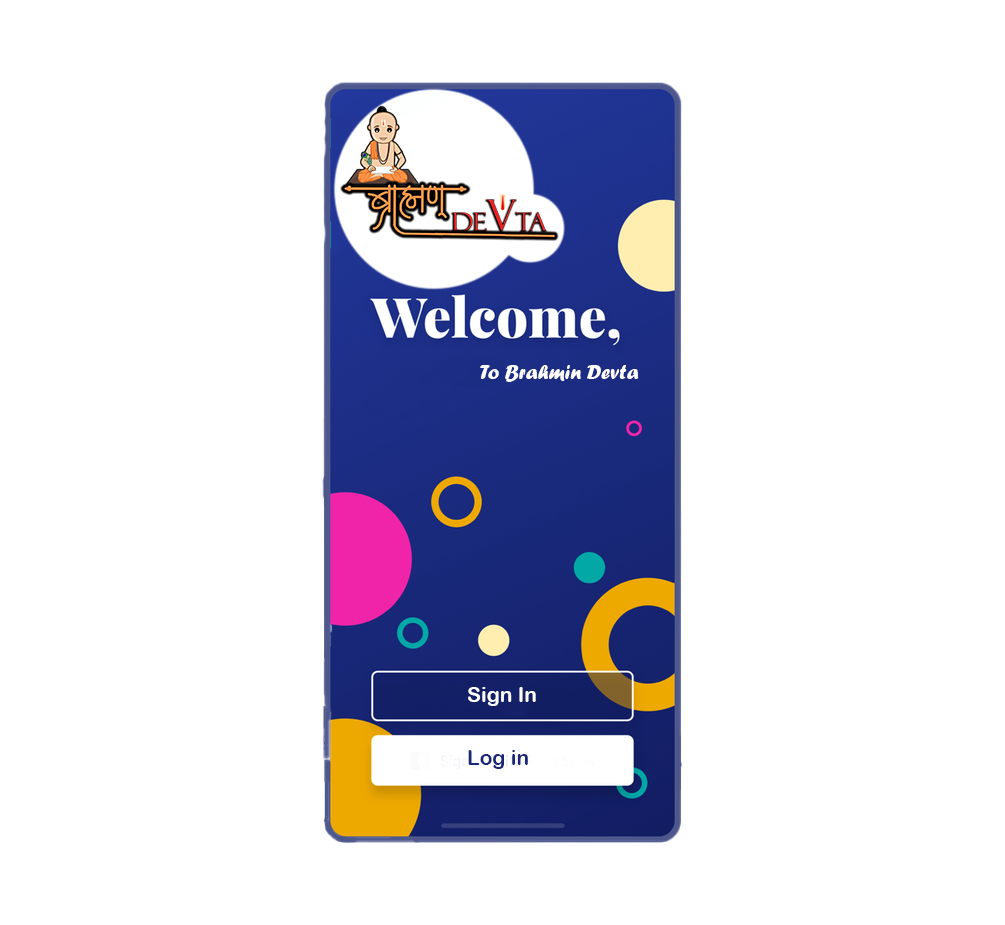
<style>
.page{position:relative;width:1005px;height:925px;background:#ffffff}
.page>*{position:absolute;margin:0}
.t1{font:21.3px "ForteMT";color:#ffffff}
.t2{font:21px "ArialRoundedMTBold";color:#ffffff}
.t3{font:21px "ArialRoundedMTBold";color:#18277a}
</style>
<div class="page">
<p class="t1" style="left:480px;top:365px;width:159px;height:17px">To Brahmin Devta</p>
<p class="t2" style="left:468px;top:687px;width:68px;height:19px">Sign In</p>
<p class="t3" style="left:468px;top:750px;width:60px;height:19px">Log in</p>
</div>
